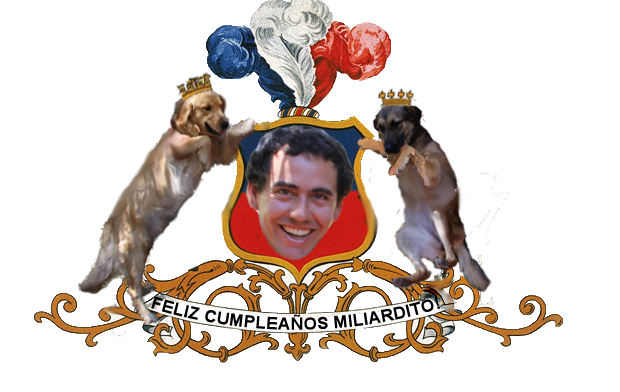
<style>
.page{position:relative;width:620px;height:392px;background:#ffffff}
.page>*{position:absolute;margin:0}
.t1{font:17px "Arial-BoldMT";color:#010101}
</style>
<div class="page">
<p class="t1" style="left:151px;top:296px;width:289px;height:34px">FELIZ CUMPLEAÑOS MILIARDITO!</p>
</div>
